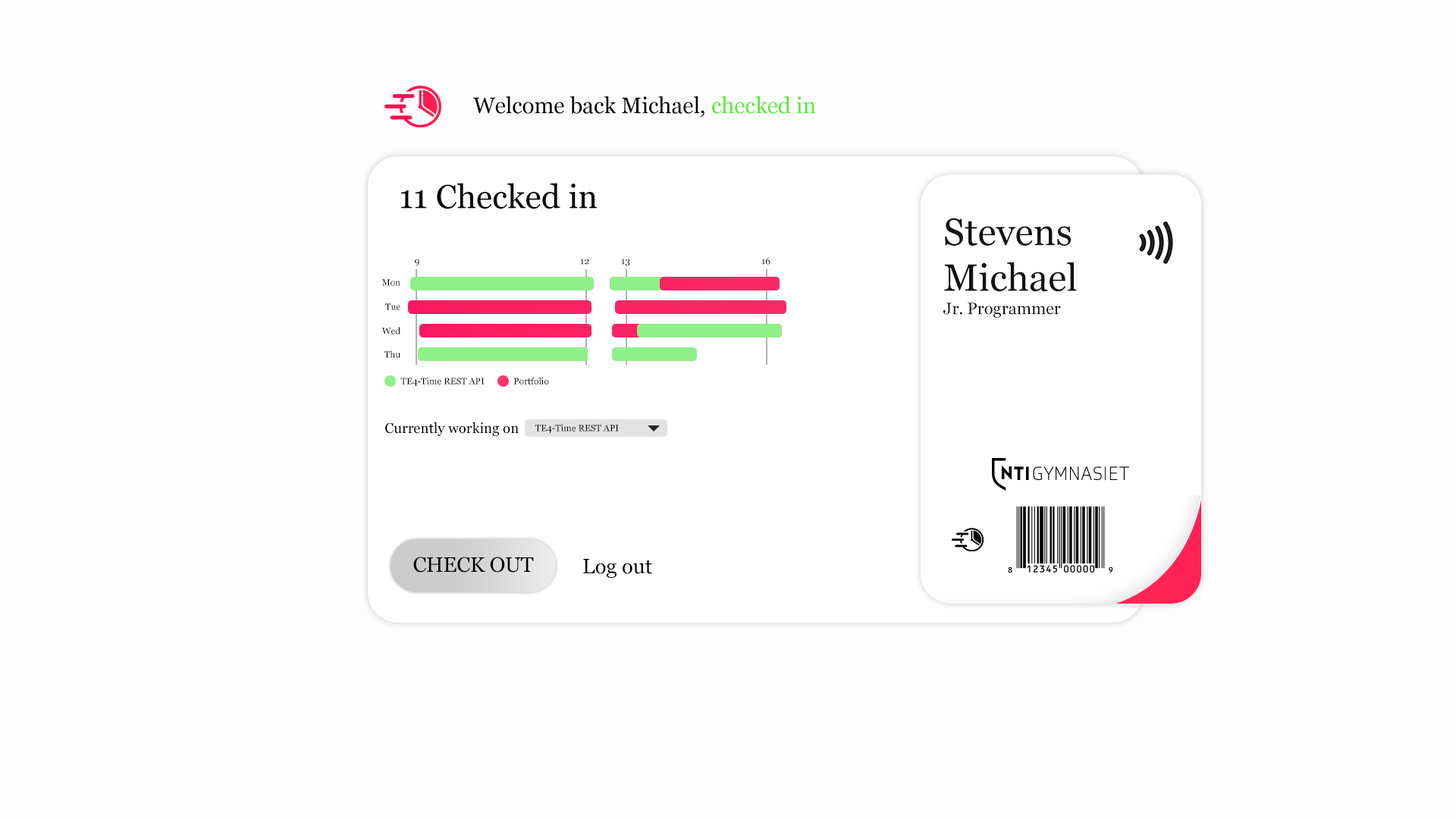
<style>
.page{position:relative;width:1456px;height:819px;background:#fdfdfd}
.page>*{position:absolute;margin:0}
.t1{font:22.3px "Georgia";color:#000000}
.t2{font:22.3px "Georgia";color:#5aec38}
.t3{font:33.2px "Georgia";color:#000000}
.t4{font:38px "Georgia";color:#161112}
.t5{font:9.1px "Georgia";color:#000000}
.t6{font:16.6px "Georgia";color:#161112}
.t7{font:14.2px "Georgia";color:#000000}
.t8{font:20.7px "Georgia";color:#000000}
</style>
<div class="page">
<p class="t1" style="left:473px;top:96px;width:343px;height:22px">Welcome back Michael, <span class="t2">checked in</span></p>
<p class="t3" style="left:401px;top:183px;width:196px;height:26px">11 Checked in</p>
<p class="t4" style="left:944px;top:218px;width:133px;height:74px">Stevens<br>Michael</p>
<p class="t5" style="left:761px;top:257px;width:9px;height:8px">16</p>
<p class="t5" style="left:415px;top:259px;width:4px;height:7px">9</p>
<p class="t5" style="left:580px;top:259px;width:9px;height:6px">12</p>
<p class="t5" style="left:621px;top:259px;width:9px;height:7px">13</p>
<p class="t5" style="left:382px;top:279px;width:18px;height:7px">Mon</p>
<p class="t5" style="left:385px;top:303px;width:15px;height:7px">Tue</p>
<p class="t6" style="left:943px;top:303px;width:118px;height:15px">Jr. Programmer</p>
<p class="t5" style="left:381px;top:327px;width:19px;height:7px">Wed</p>
<p class="t5" style="left:384px;top:350px;width:16px;height:8px">Thu</p>
<p class="t5" style="left:400px;top:377px;width:85px;height:9px">TE4-Time REST API</p>
<p class="t5" style="left:513px;top:377px;width:36px;height:7px">Portfolio</p>
<p class="t7" style="left:385px;top:422px;width:134px;height:14px">Currently working on</p>
<p class="t5" style="left:535px;top:424px;width:84px;height:9px">TE4-Time REST API</p>
<p class="t8" style="left:413px;top:557px;width:121px;height:16px">CHECK OUT</p>
<p class="t8" style="left:583px;top:559px;width:69px;height:19px">Log out</p>
</div>
